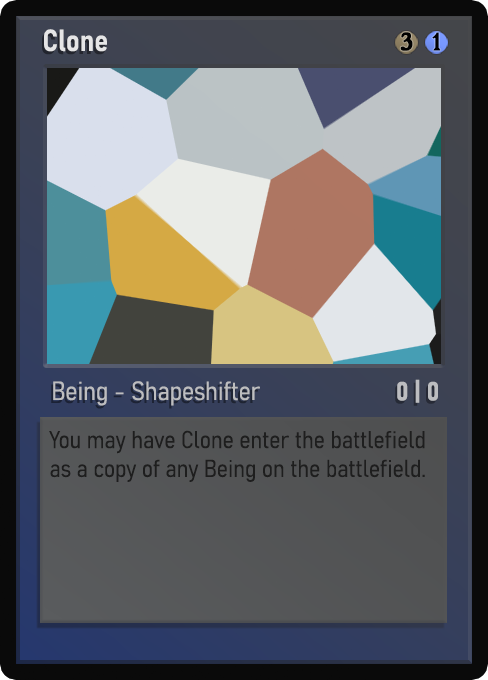
<style>
.page{position:relative;width:488px;height:680px}
.page>*{position:absolute;margin:0}
.t1{font:30px "Bahnschrift-SemiBoldSemiCondensed";color:#f2f2f2;font-weight:bold}
.t2{font:25px "WTRRoycroft";color:#000000;font-weight:bold;scale:1.09 1}
.t3{font:26px "Bahnschrift-LightSemiCondensed";color:#c8c8c8;font-weight:bold}
.t4{font:26px "Bahnschrift-BoldSemiCondensed";color:#bcbdc0;font-weight:bold}
.t5{font:24px "Bahnschrift-LightSemiCondensed";color:#1e1e1e;font-weight:bold}
</style>
<div class="page">
<p class="t1" style="left:44px;top:29px;width:63px;height:23px;opacity:0.9">Clone</p>
<p class="t2" style="left:400px;top:32px;width:13px;height:19px">3</p>
<p class="t2" style="left:432px;top:32px;width:9px;height:19px">1</p>
<p class="t3" style="left:53px;top:381px;width:207px;height:25px;opacity:0.9">Being - Shapeshifter</p>
<p class="t4" style="left:397px;top:379px;width:41px;height:24px">0 | 0</p>
<p class="t5" style="left:49px;top:430px;width:376px;height:52px">You may have Clone enter the battlefield as a copy of any Being on the battlefield.</p>
</div>
